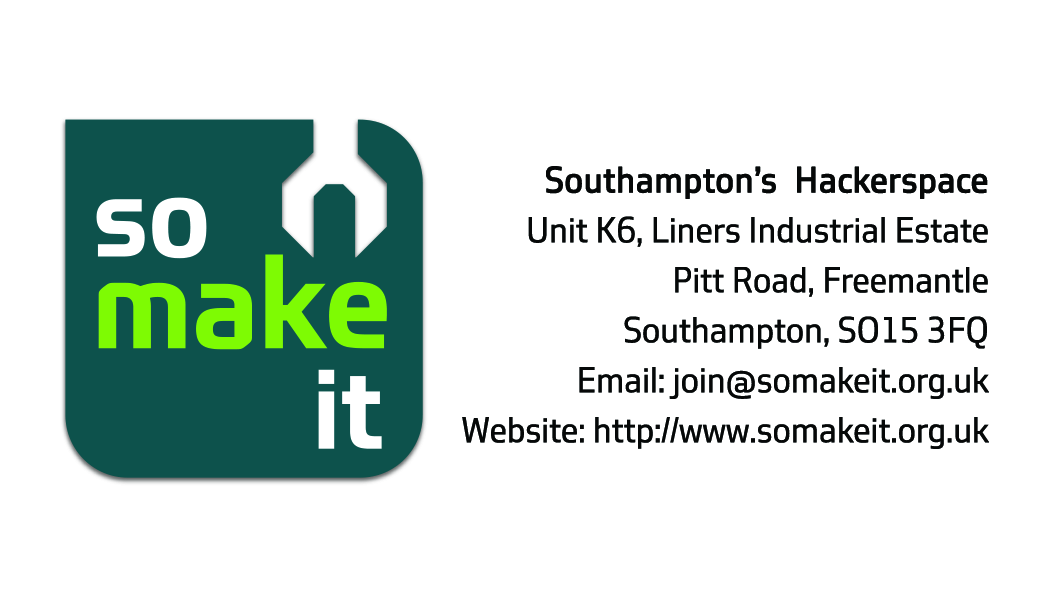
<style>
.page{position:relative;width:1062px;height:615px;background:#ffffff}
.page>*{position:absolute;margin:0}
.t1{font:33.3px/50px "Southampton";color:#060808}
.t2{font:33.3px/50px "Southampton";color:#060808;font-weight:bold}
.t3{font:33.3px "Southampton";color:#060808}
</style>
<div class="page">
<p class="t1" style="left:462px;top:166px;width:527px;height:283px;text-align:right"><span class="t2">Southampton’s  Hackerspace<br></span> Unit K6, Liners Industrial Estate<br>Pitt Road, Freemantle<br>Southampton, SO15 3FQ <br>Email: join@somakeit.org.uk<br>Website: http://www.somakeit.org.uk<br><span class="t3"><br><br><br>Website http://www.somakeit.org.uk</span></p>
</div>
